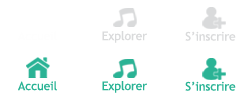
<style>
.page{position:relative;width:250px;height:100px;background:#ffffff}
.page>*{position:absolute;margin:0}
.t1{font:12px "TrebuchetMS";color:#d9dadb}
.t2{font:11.8px "TrebuchetMS";color:#2ab395}
.t3{font:12px "TrebuchetMS";color:#2ab395}
</style>
<div class="page">
<p class="t1" style="left:102px;top:31px;width:45px;height:12px">Explorer</p>
<p class="t1" style="left:185px;top:31px;width:51px;height:10px">S’inscrire</p>
<p class="t2" style="left:18px;top:81px;width:39px;height:10px">Accueil</p>
<p class="t3" style="left:102px;top:81px;width:45px;height:12px">Explorer</p>
<p class="t3" style="left:185px;top:81px;width:51px;height:10px">S’inscrire</p>
</div>
